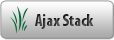
<style>
.page{position:relative;width:114px;height:40px}
.page>*{position:absolute;margin:0}
.t1{font:16.7px "MyriadPro-BoldCond"}
</style>
<div class="page">
<p class="t1" style="left:35px;top:14px;width:59px;height:15px">Ajax Stack</p>
</div>
